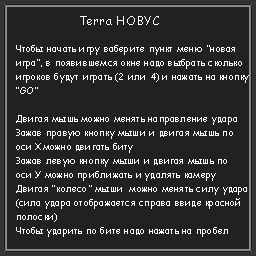
<style>
.page{position:relative;width:256px;height:256px;background:#212121}
.page>*{position:absolute;margin:0}
.t1{font:12px "ComicSansMS";letter-spacing:0.025em;color:#ffffff}
.t2{font:9px/14px "ComicSansMS";letter-spacing:0.025em;color:#ffffff}
</style>
<div class="page">
<p class="t1" style="left:80px;top:16px;width:79px;height:9px">Terra HOBYC</p>
<p class="t2" style="left:16px;top:45px;width:233px;height:192px">Чтобы начать игру ваберите пункт меню ”новая <br>игра”, в появившемся окне надо выбрать сколько <br>игроков будут играть (2 или 4) и нажать на кнопку<br>“GO”<br><br>Двигая мышь можно менять направление удара<br>Зажав правую кнопку мыши и двигая мышь по <br>оси Хможно двигать биту<br>Зажав левую кнопку мыши и двигая мышь по <br>оси У можно приближать и удалять камеру<br>Двигая “колесо” мыши  можно менять силу удара<br>(сила удара отображается справа ввиде красной<br>полоски)<br>Чтобы ударить по бите надо нажать на пробел</p>
</div>
